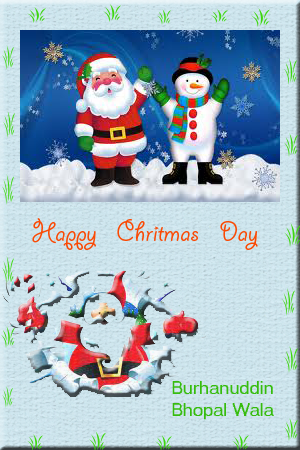
<style>
.page{position:relative;width:300px;height:450px}
.page>*{position:absolute;margin:0}
.t1{font:30px "GiddyupStd";color:#fa4a05}
.t2{font:18px "MS Sans Serif";color:#36bc0d}
</style>
<div class="page">
<p class="t1" style="left:32px;top:218px;width:226px;height:32px">Happy    Chritmas    Day</p>
<p class="t2" style="left:172px;top:381px;width:102px;height:39px">Burhanuddin<br>Bhopal Wala</p>
</div>
